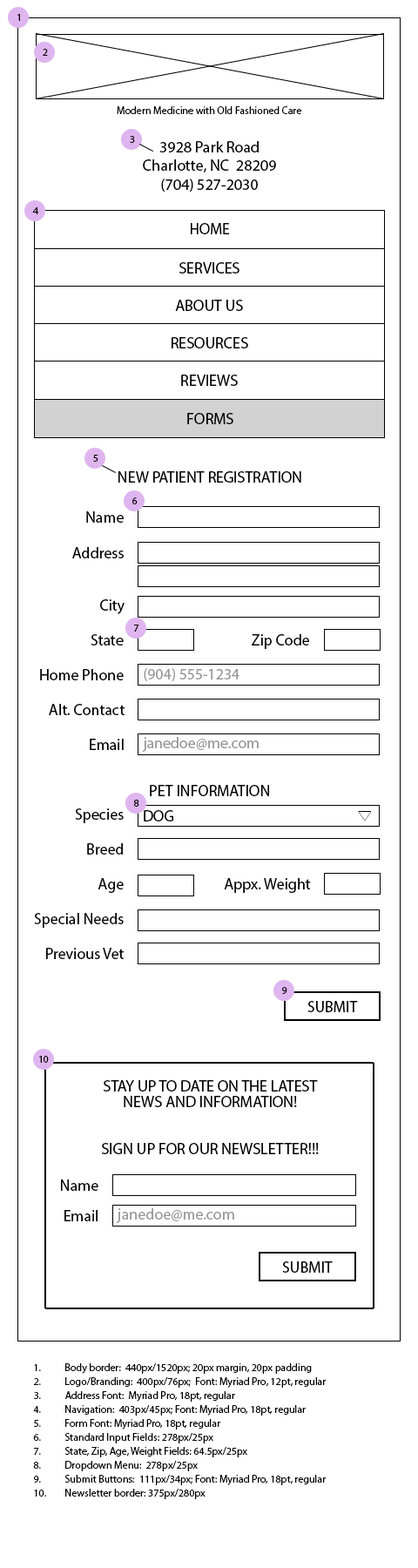
<style>
.page{position:relative;width:418px;height:1568px;background:#ffffff}
.page>*{position:absolute;margin:0}
.t1{font:10.5px "MyriadPro-Regular";color:#000000}
.t2{font:15.7px "MyriadPro-Regular";color:#000000}
.t3{font:15.7px "MyriadPro-Regular";color:#9b9999}
.t4{font:15.7px/15.7px "MyriadPro-Regular";color:#000000}
.t5{font:10.5px/13.9px "MyriadPro-Regular";color:#000000}
</style>
<div class="page">
<p class="t1" style="left:17px;top:14px;width:3px;height:7px">1</p>
<p class="t1" style="left:43px;top:49px;width:5px;height:7px">2</p>
<p class="t1" style="left:117px;top:106px;width:184px;height:8px">Modern Medicine with Old Fashioned Care</p>
<p class="t1" style="left:130px;top:136px;width:5px;height:7px">3</p>
<p class="t2" style="left:143px;top:141px;width:133px;height:51px;text-align:center">3928 Park Road<br>Charlotte, NC  28209<br>(704) 527-2030</p>
<p class="t1" style="left:32px;top:207px;width:7px;height:7px">4</p>
<p class="t2" style="left:191px;top:223px;width:39px;height:11px">HOME</p>
<p class="t2" style="left:179px;top:262px;width:61px;height:12px">SERVICES</p>
<p class="t2" style="left:175px;top:300px;width:68px;height:11px">ABOUT US</p>
<p class="t2" style="left:172px;top:337px;width:76px;height:11px">RESOURCES</p>
<p class="t2" style="left:181px;top:375px;width:57px;height:11px">REVIEWS</p>
<p class="t2" style="left:187px;top:413px;width:46px;height:11px">FORMS</p>
<p class="t1" style="left:93px;top:455px;width:5px;height:7px">5</p>
<p class="t2" style="left:118px;top:471px;width:183px;height:12px">NEW PATIENT REGISTRATION</p>
<p class="t1" style="left:132px;top:497px;width:6px;height:7px">6</p>
<p class="t2" style="left:86px;top:511px;width:38px;height:12px">Name</p>
<p class="t2" style="left:72px;top:547px;width:52px;height:11px">Address</p>
<p class="t2" style="left:100px;top:599px;width:25px;height:15px">City</p>
<p class="t1" style="left:134px;top:625px;width:5px;height:7px">7</p>
<p class="t2" style="left:91px;top:634px;width:33px;height:11px">State</p>
<p class="t2" style="left:252px;top:634px;width:57px;height:15px">Zip Code</p>
<p class="t2" style="left:40px;top:669px;width:84px;height:11px">Home Phone</p>
<p class="t3" style="left:144px;top:668px;width:96px;height:13px">(904) 555-1234</p>
<p class="t2" style="left:49px;top:704px;width:76px;height:11px">Alt. Contact</p>
<p class="t3" style="left:142px;top:737px;width:117px;height:15px">janedoe@me.com</p>
<p class="t2" style="left:90px;top:739px;width:34px;height:11px">Email</p>
<p class="t2" style="left:150px;top:785px;width:119px;height:11px">PET INFORMATION</p>
<p class="t2" style="left:75px;top:808px;width:49px;height:15px">Species</p>
<p class="t1" style="left:134px;top:800px;width:5px;height:7px">8</p>
<p class="t2" style="left:144px;top:810px;width:29px;height:11px">DOG</p>
<p class="t2" style="left:87px;top:843px;width:36px;height:12px">Breed</p>
<p class="t2" style="left:98px;top:878px;width:26px;height:15px">Age</p>
<p class="t2" style="left:224px;top:878px;width:87px;height:15px">Appx. Weight</p>
<p class="t2" style="left:34px;top:913px;width:90px;height:15px">Special Needs</p>
<p class="t2" style="left:46px;top:948px;width:79px;height:11px">Previous Vet</p>
<p class="t1" style="left:282px;top:987px;width:5px;height:7px">9</p>
<p class="t2" style="left:308px;top:1001px;width:50px;height:11px">SUBMIT</p>
<p class="t1" style="left:39px;top:1056px;width:10px;height:7px">10</p>
<p class="t4" style="left:102px;top:1080px;width:217px;height:74px;text-align:center">STAY UP TO DATE ON THE LATEST<br>NEWS AND INFORMATION!<br><br><br>SIGN UP FOR OUR NEWSLETTER!!!</p>
<p class="t2" style="left:61px;top:1179px;width:37px;height:12px">Name</p>
<p class="t2" style="left:64px;top:1210px;width:34px;height:11px">Email</p>
<p class="t3" style="left:116px;top:1208px;width:118px;height:15px">janedoe@me.com</p>
<p class="t2" style="left:282px;top:1261px;width:51px;height:12px">SUBMIT</p>
<p class="t5" style="left:33px;top:1363px;width:294px;height:136px">1. Body border:  440px/1520px; 20px margin, 20px padding<br>2. Logo/Branding:  400px/76px;  Font: Myriad Pro, 12pt, regular<br>3. Address Font:  Myriad Pro, 18pt, regular<br>4. Navigation:  403px/45px; Font: Myriad Pro, 18pt, regular<br>5. Form Font: Myriad Pro, 18pt, regular<br>6. Standard Input Fields: 278px/25px<br>7. State, Zip, Age, Weight Fields: 64.5px/25px<br>8. Dropdown Menu:  278px/25px<br>9. Submit Buttons:  111px/34px; Font: Myriad Pro, 18pt, regular<br>10. Newsletter border: 375px/280px</p>
</div>
